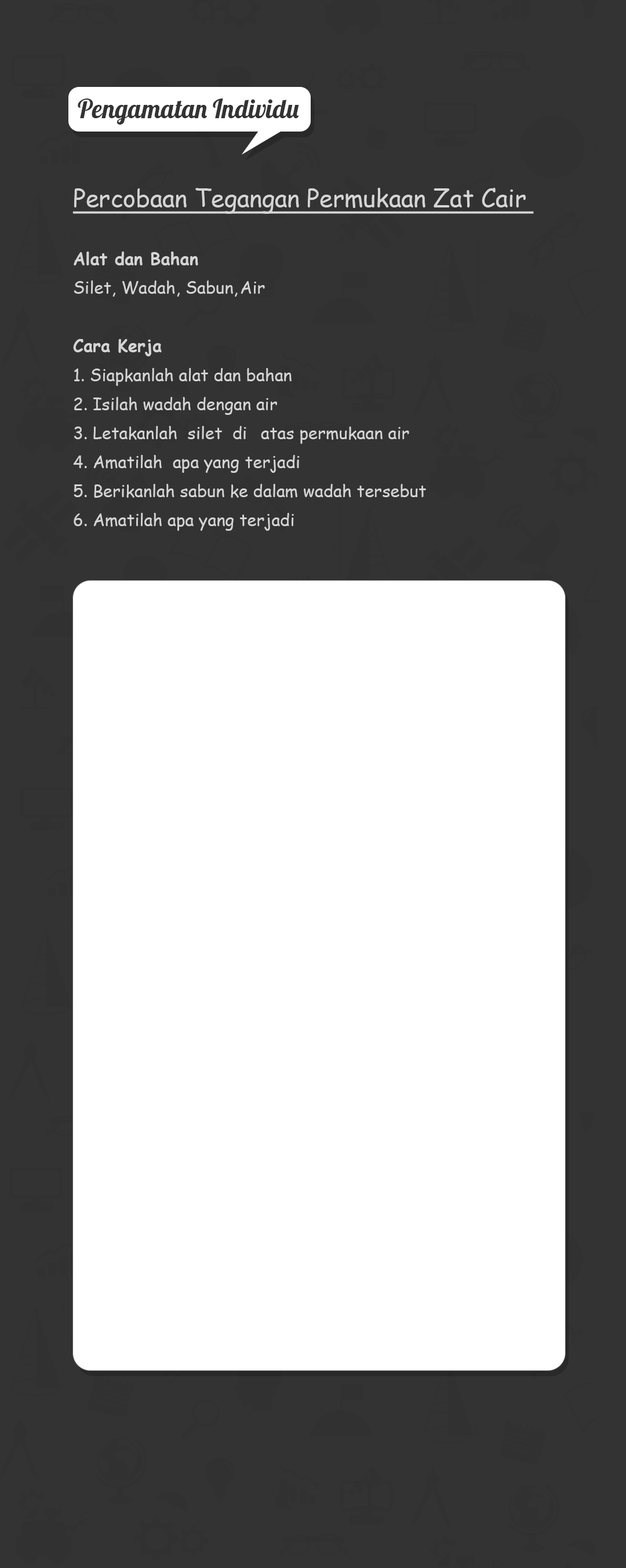
<style>
.page{position:relative;width:626px;height:1568px;background:#333333}
.page>*{position:absolute;margin:0}
.t1{font:25.8px "Lobster-Regular";color:#333333}
.t2{font:16.9px/29px "ComicSansMS";color:#d5d5d5}
.t3{font:24.2px/29px "ComicSansMS";color:#d5d5d5;text-decoration:underline}
.t4{font:16.9px/29px "ComicSansMS-Bold";color:#d5d5d5}
</style>
<div class="page">
<p class="t1" style="left:78px;top:99px;width:221px;height:26px">Pengamatan Individu</p>
<p class="t2" style="left:72px;top:188px;width:462px;height:343px;text-align:justify"><span class="t3">Percobaan Tegangan Permukaan Zat Cair <br><br></span><span class="t4">Alat dan Bahan <br></span>Silet, Wadah, Sabun, Air<br><br><span class="t4">Cara Kerja<br></span>1. Siapkanlah alat dan bahan<br>2. Isilah wadah dengan air <br>3. Letakanlah  silet  di atas permukaan air<br>4. Amatilah  apa yang  terjadi<br>5. Berikanlah sabun ke dalam wadah tersebut<br>6. Amatilah apa yang terjadi</p>
</div>
